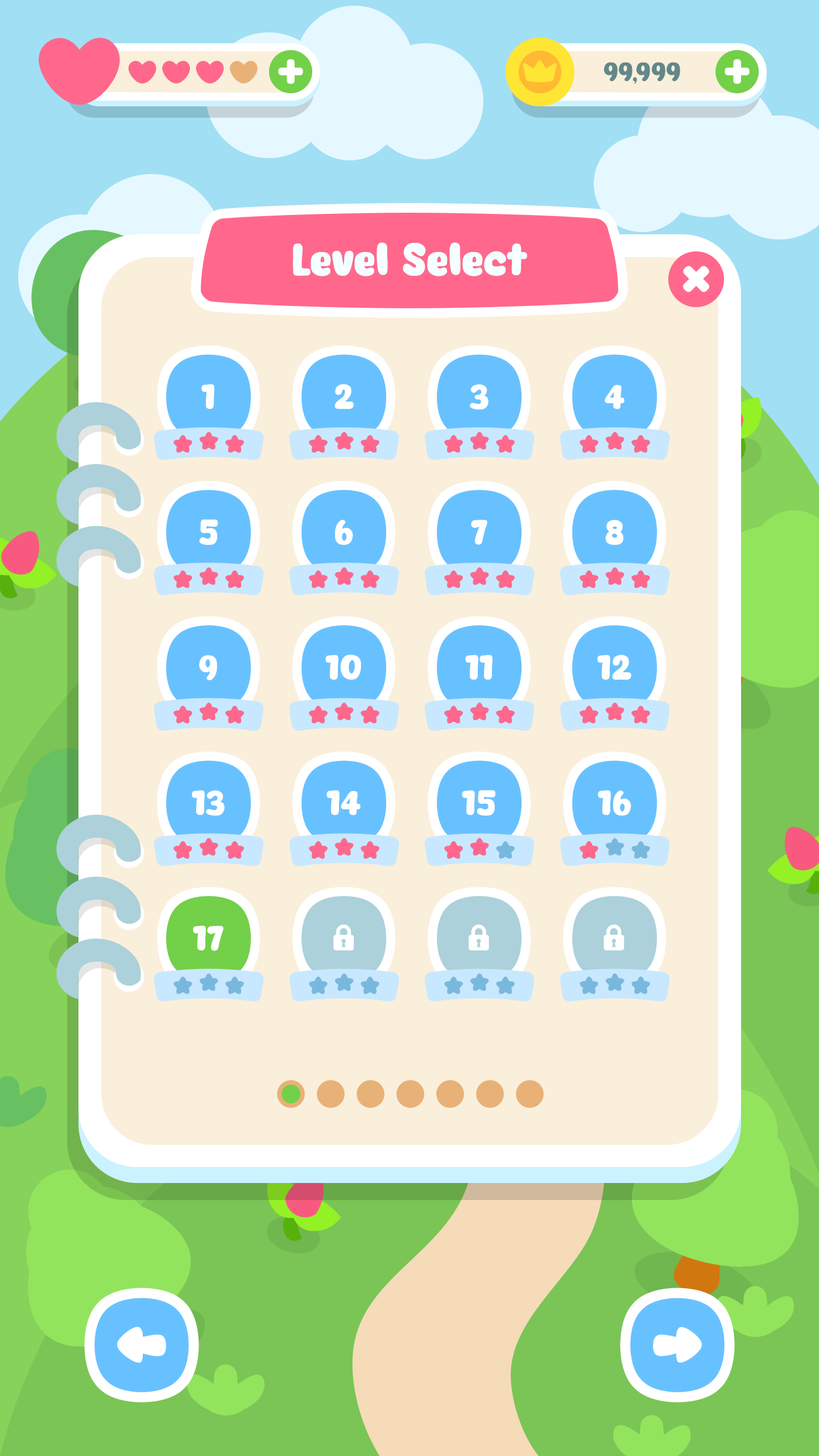
<style>
.page{position:relative;width:819px;height:1456px;background:#faefdb}
.page>*{position:absolute;margin:0}
.t1{font:43.8px "Eazy-Chat";color:#f5ffff}
.t2{font:33.8px "Eazy-Chat";color:#ffffff}
</style>
<div class="page">
<p class="t1" style="left:293px;top:242px;width:234px;height:34px">Level Select</p>
<p class="t2" style="left:201px;top:384px;width:13px;height:25px">1</p>
<p class="t2" style="left:334px;top:384px;width:20px;height:25px">2</p>
<p class="t2" style="left:470px;top:384px;width:19px;height:25px">3</p>
<p class="t2" style="left:605px;top:384px;width:19px;height:25px">4</p>
<p class="t2" style="left:199px;top:519px;width:19px;height:26px">5</p>
<p class="t2" style="left:335px;top:520px;width:18px;height:25px">6</p>
<p class="t2" style="left:471px;top:520px;width:16px;height:25px">7</p>
<p class="t2" style="left:605px;top:520px;width:19px;height:25px">8</p>
<p class="t2" style="left:199px;top:655px;width:18px;height:25px">9</p>
<p class="t2" style="left:325px;top:655px;width:36px;height:25px">10</p>
<p class="t2" style="left:465px;top:655px;width:28px;height:25px">11</p>
<p class="t2" style="left:597px;top:655px;width:34px;height:25px">12</p>
<p class="t2" style="left:192px;top:790px;width:33px;height:26px">13</p>
<p class="t2" style="left:326px;top:790px;width:35px;height:25px">14</p>
<p class="t2" style="left:462px;top:790px;width:33px;height:26px">15</p>
<p class="t2" style="left:598px;top:790px;width:33px;height:26px">16</p>
<p class="t2" style="left:193px;top:925px;width:31px;height:26px">17</p>
</div>
